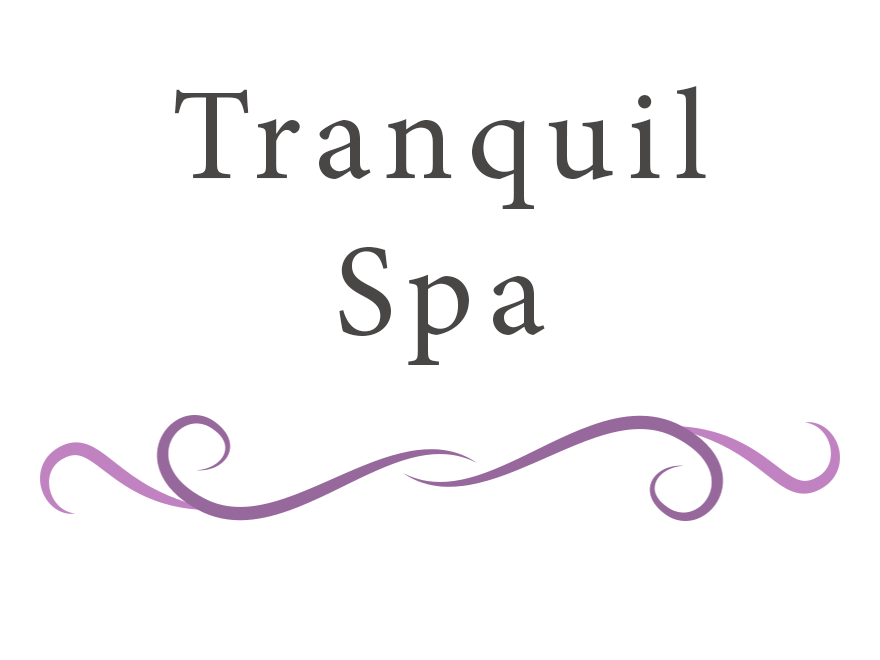
<style>
.page{position:relative;width:880px;height:660px;background:#ffffff}
.page>*{position:absolute;margin:0}
.t1{font:130px "MinionPro-Regular";letter-spacing:0.1em;color:#494646}
</style>
<div class="page">
<p class="t1" style="left:174px;top:86px;width:532px;height:279px;text-align:center">Tranquil <br>Spa</p>
</div>
